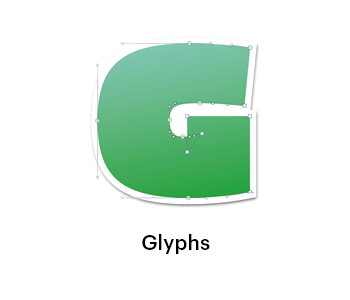
<style>
.page{position:relative;width:350px;height:300px;background:#ffffff}
.page>*{position:absolute;margin:0}
.t1{font:20.6px "Graphik-Medium";color:#000000}
</style>
<div class="page">
<p class="t1" style="left:142px;top:234px;width:68px;height:20px">Glyphs</p>
</div>
